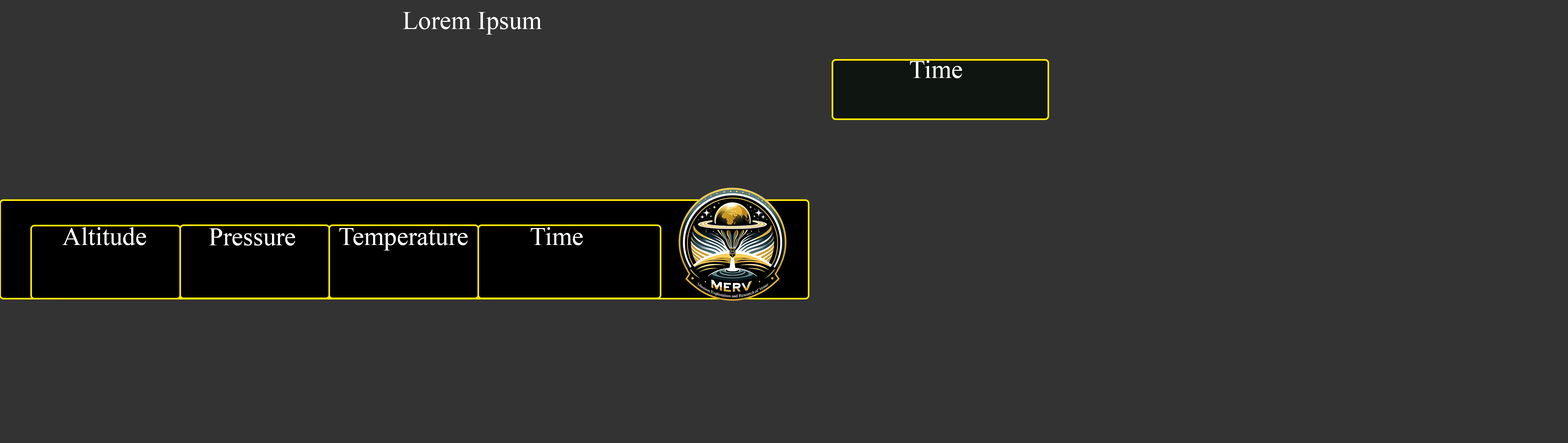
<style>
.page{position:relative;width:1568px;height:443px;background:#333333}
.page>*{position:absolute;margin:0}
.t1{font:25.8px "TimesNewRomanPSMT";color:#ffffff}
</style>
<div class="page">
<p class="t1" style="left:403px;top:12px;width:139px;height:23px">Lorem Ipsum</p>
<p class="t1" style="left:910px;top:60px;width:52px;height:18px">Time</p>
<p class="t1" style="left:62px;top:227px;width:84px;height:18px">Altitude</p>
<p class="t1" style="left:209px;top:228px;width:86px;height:18px">Pressure</p>
<p class="t1" style="left:339px;top:228px;width:129px;height:22px">Temperature</p>
<p class="t1" style="left:531px;top:227px;width:52px;height:18px">Time</p>
</div>
